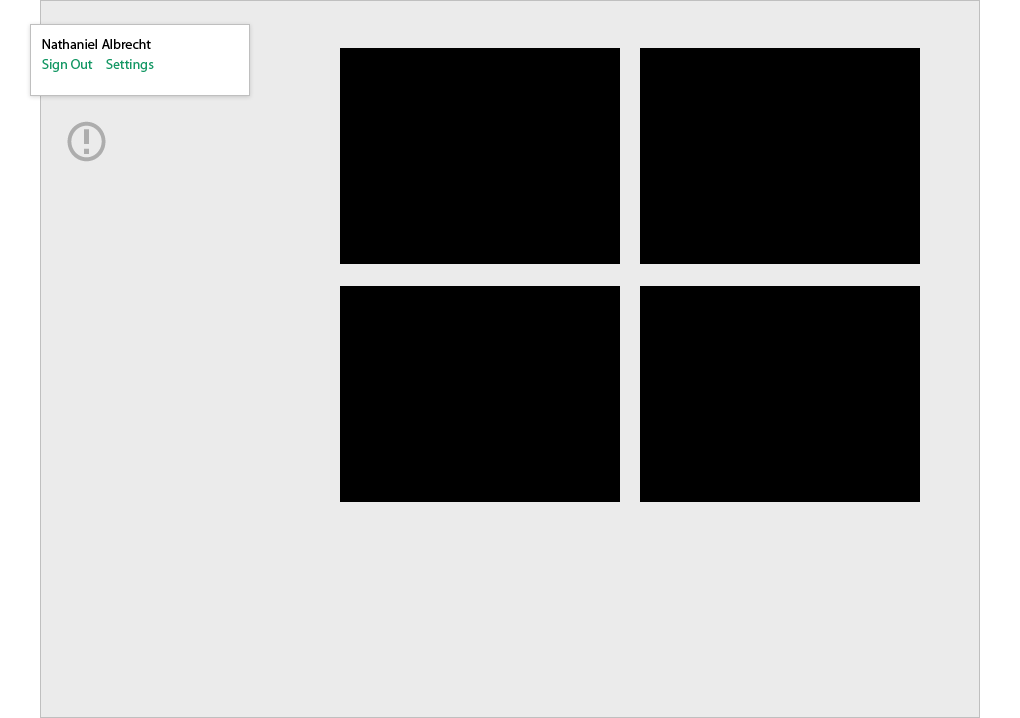
<style>
.page{position:relative;width:1020px;height:718px;background:#ebebeb}
.page>*{position:absolute;margin:0}
.t1{font:14px "MyriadPro-Regular";color:#000000}
.t2{font:14px "MyriadPro-Regular";color:#159865}
</style>
<div class="page">
<p class="t1" style="left:42px;top:39px;width:109px;height:10px">Nathaniel Albrecht</p>
<p class="t2" style="left:42px;top:59px;width:51px;height:13px">Sign Out</p>
<p class="t2" style="left:106px;top:59px;width:48px;height:13px">Settings</p>
</div>
